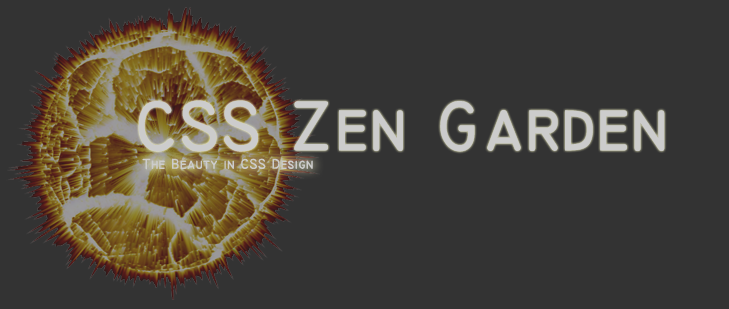
<style>
.page{position:relative;width:729px;height:309px;background:#333333}
.page>*{position:absolute;margin:0}
.t1{font:72px "TechnicBold";color:#cccccc}
.t2{font:14.5px "TechnicBold";color:#cccccc}
</style>
<div class="page">
<p class="t1" style="left:138px;top:100px;width:527px;height:52px">CSS Zen Garden</p>
<p class="t2" style="left:142px;top:158px;width:171px;height:12px">The Beauty in CSS Design</p>
</div>
